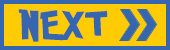
<style>
.page{position:relative;width:170px;height:50px;background:#ffcb05}
.page>*{position:absolute;margin:0}
.t1{font:28px "PokemonSolidNormal";letter-spacing:0.2em;color:#3566af}
.t2{font:28px "PokemonSolidNormal";letter-spacing:0.18em;color:#3566af}
</style>
<div class="page">
<p class="t1" style="left:18px;top:9px;width:90px;height:33px"><span class="t2">N</span>EX<span class="t2">T</span></p>
</div>
